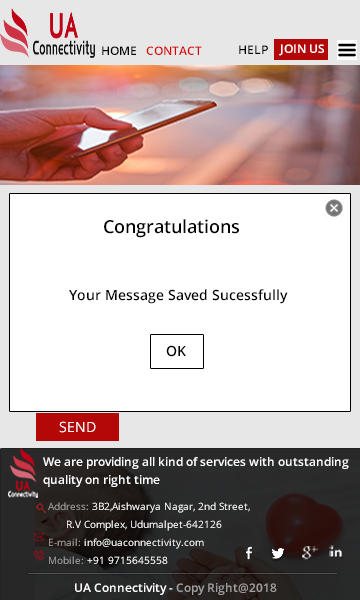
<style>
.page{position:relative;width:360px;height:600px;background:#ffffff}
.page>*{position:absolute;margin:0}
.t1{font:12px "OpenSans-Semibold";color:#030000}
.t2{font:12px "OpenSans-Semibold";color:#d80505}
.t3{font:12px "OpenSans-Semibold";color:#ffffff}
.t4{font:18px "OpenSans-Semibold";color:#040404}
.t5{font:12px "OpenSans";color:#040404}
.t6{font:14px "OpenSans-Semibold";color:#000000}
.t7{font:12px "OpenSans-Semibold";color:#000000}
.t8{font:14px "OpenSans";color:#ffffff}
.t9{font:12px/6px "OpenSans-Semibold";color:#ffffff}
.t10{font:10px/6px "OpenSans";color:#ffffff}
.t11{font:10px/6px "OpenSans";color:#a39f9f}
.t12{font:12px "OpenSans-Semibold";color:#a09d9d}
</style>
<div class="page">
<p class="t1" style="left:102px;top:46px;width:34px;height:9px">HOME</p>
<p class="t2" style="left:146px;top:46px;width:56px;height:9px">CONTACT</p>
<p class="t1" style="left:239px;top:45px;width:29px;height:9px">HELP</p>
<p class="t3" style="left:279px;top:44px;width:45px;height:12px">JOIN US</p>
<p class="t4" style="left:104px;top:219px;width:135px;height:19px"><span class="t5"><br>           <br><br>              <br>           <br>                  </span>  Congratulations</p>
<p class="t6" style="left:69px;top:289px;width:219px;height:15px"><span class="t7"><br> <br><br><br><br><br>          <br><br><br>           <br><br><br>            <br>        </span>  Your Message Saved Sucessfully</p>
<p class="t6" style="left:166px;top:345px;width:20px;height:12px"><span class="t7"><br>  <br>    </span>OK</p>
<p class="t8" style="left:59px;top:421px;width:37px;height:12px"><span class="t5"><br> <br>    </span>SEND</p>
<p class="t9" style="left:43px;top:457px;width:306px;height:30px">We are providing all kind of services with outstanding <br><br><br>quality on right time</p>
<p class="t10" style="left:48px;top:502px;width:202px;height:62px"><span class="t11">Address:</span> 3B2,Aishwarya Nagar, 2nd Street,<br><br><br>      R.V Complex, Udumalpet-642126<br><br><br><span class="t11">E-mail: </span>info@uaconnectivity.com<br><br><br><span class="t11">Mobile:</span> +91 9715645558</p>
<p class="t3" style="left:75px;top:583px;width:202px;height:12px">UA Connectivity - <span class="t12">Copy Right@2018</span></p>
</div>
